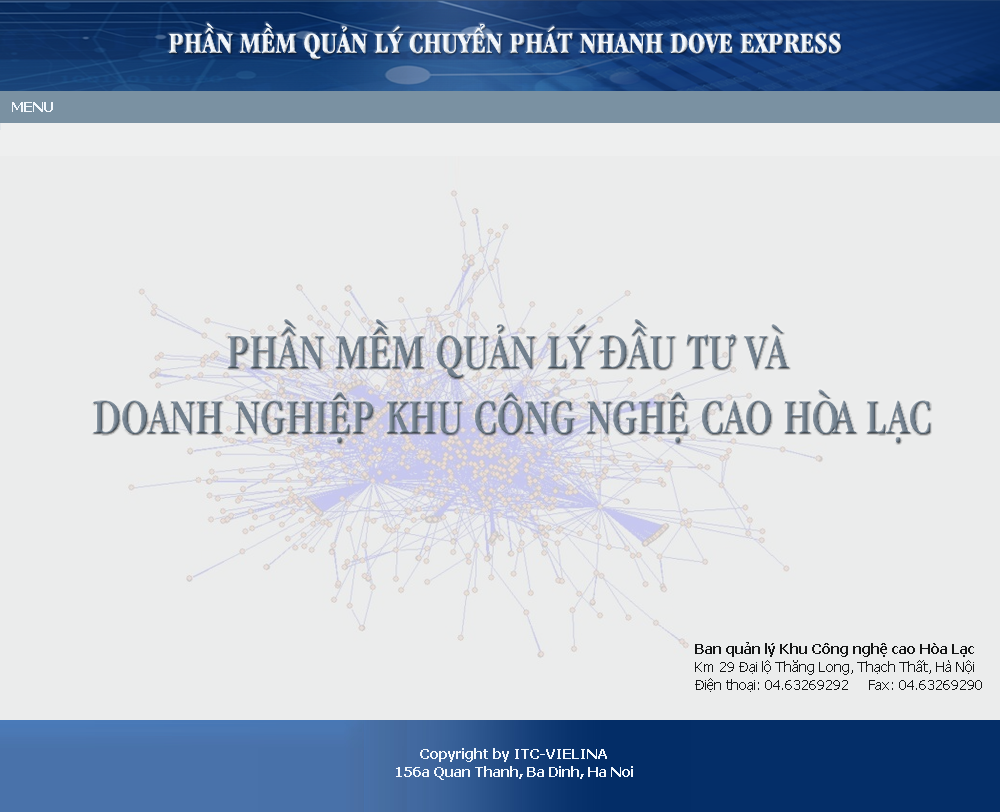
<style>
.page{position:relative;width:1000px;height:812px;background:#ebecec}
.page>*{position:absolute;margin:0}
.t1{font:30px "UVNGiaDinhHepBold";color:#f3f8fd}
.t2{font:14px "Tahoma-Bold";color:#f3f8fd}
.t3{font:50.7px/65.2px "UVNGiaDinhHep";color:#738290}
.t4{font:14px/18px "Tahoma";color:#151616}
.t5{font:14px/18px "Tahoma-Bold";color:#151616}
.t6{font:14px/18px "Tahoma-Bold";color:#f3f8fd}
</style>
<div class="page">
<p class="t1" style="left:169px;top:23px;width:672px;height:37px">PHẦN MỀM QUẢN LÝ CHUYỂN PHÁT NHANH DOVE EXPRESS</p>
<p class="t2" style="left:12px;top:102px;width:41px;height:10px">MENU</p>
<p class="t3" style="left:93px;top:319px;width:838px;height:124px;text-align:center">PHẦN MỀM QUẢN LÝ ĐẦU TƯ VÀ <br>DOANH NGHIỆP KHU CÔNG NGHỆ CAO HÒA LẠC</p>
<p class="t4" style="left:695px;top:642px;width:287px;height:50px"><span class="t5">Ban quản lý Khu Công nghệ cao Hòa Lạc<br></span>Km 29 Đại lộ Thăng Long, Thạch Thất, Hà Nội <br>Điện thoại: 04.63269292     Fax: 04.63269290</p>
<p class="t6" style="left:396px;top:748px;width:237px;height:32px;text-align:center">Copyright by ITC-VIELINA<br>156a Quan Thanh, Ba Dinh, Ha Noi</p>
</div>
